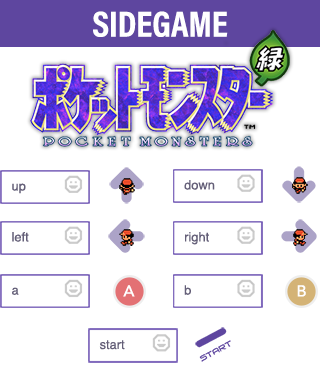
<style>
.page{position:relative;width:320px;height:375px;background:#ffffff}
.page>*{position:absolute;margin:0}
.t1{font:36.3px "AcuminProCond-Bold";color:#ffffff;text-transform:uppercase}
.t2{font:12.9px "Helvetica";color:#645f78}
.t3{font:15.8px "Avenir-Medium";color:#ffffff}
</style>
<div class="page">
<p class="t1" style="left:93px;top:11px;width:135px;height:26px">Sidegame</p>
<p class="t2" style="left:12px;top:183px;width:14px;height:11px">up</p>
<p class="t2" style="left:184px;top:180px;width:31px;height:10px">down</p>
<p class="t2" style="left:12px;top:232px;width:17px;height:10px">left</p>
<p class="t2" style="left:185px;top:232px;width:24px;height:13px">right</p>
<p class="t2" style="left:12px;top:287px;width:7px;height:8px">a</p>
<p class="t3" style="left:123px;top:285px;width:12px;height:12px">A</p>
<p class="t2" style="left:184px;top:285px;width:7px;height:10px">b</p>
<p class="t3" style="left:297px;top:285px;width:9px;height:12px">B</p>
<p class="t2" style="left:99px;top:340px;width:26px;height:10px">start</p>
</div>
